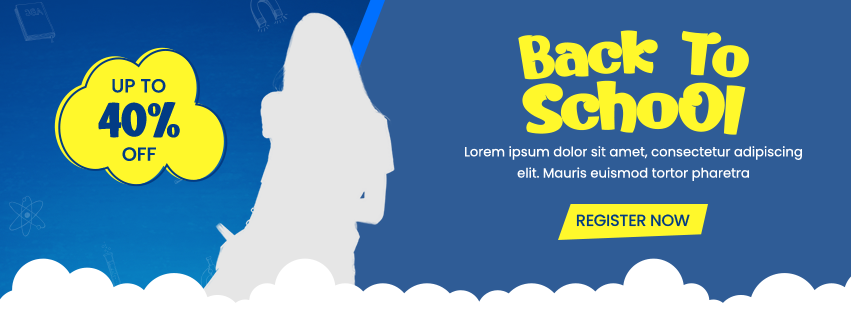
<style>
.page{position:relative;width:851px;height:315px;background:#2f5c96}
.page>*{position:absolute;margin:0}
.t1{font:58.5px "Kerokero";letter-spacing:-0.02em;color:#fff82b;scale:1.15 1}
.t2{font:19px "Poppins-Medium";color:#023c85}
.t3{font:66.1px "Kerokero";letter-spacing:-0.02em;color:#fff82b;scale:1.15 1}
.t4{font:47.7px "Kerokero";color:#023c85}
.t5{font:13.2px/21.2px "Poppins-Regular";color:#ffffff}
.t6{font:16.2px "Poppins-Medium";letter-spacing:-0.02em;color:#023b83}
</style>
<div class="page">
<p class="t1" style="left:518px;top:30px;width:231px;height:50px">Back To</p>
<p class="t2" style="left:112px;top:79px;width:54px;height:14px">UP TO</p>
<p class="t3" style="left:522px;top:80px;width:224px;height:55px">SchoOl</p>
<p class="t4" style="left:98px;top:102px;width:82px;height:36px">40%</p>
<p class="t2" style="left:122px;top:147px;width:34px;height:14px">OFF</p>
<p class="t5" style="left:465px;top:146px;width:337px;height:35px;text-align:center">Lorem ipsum dolor sit amet, consectetur adipiscing elit. Mauris euismod tortor pharetra</p>
<p class="t6" style="left:576px;top:214px;width:114px;height:13px">REGISTER NOW</p>
</div>
